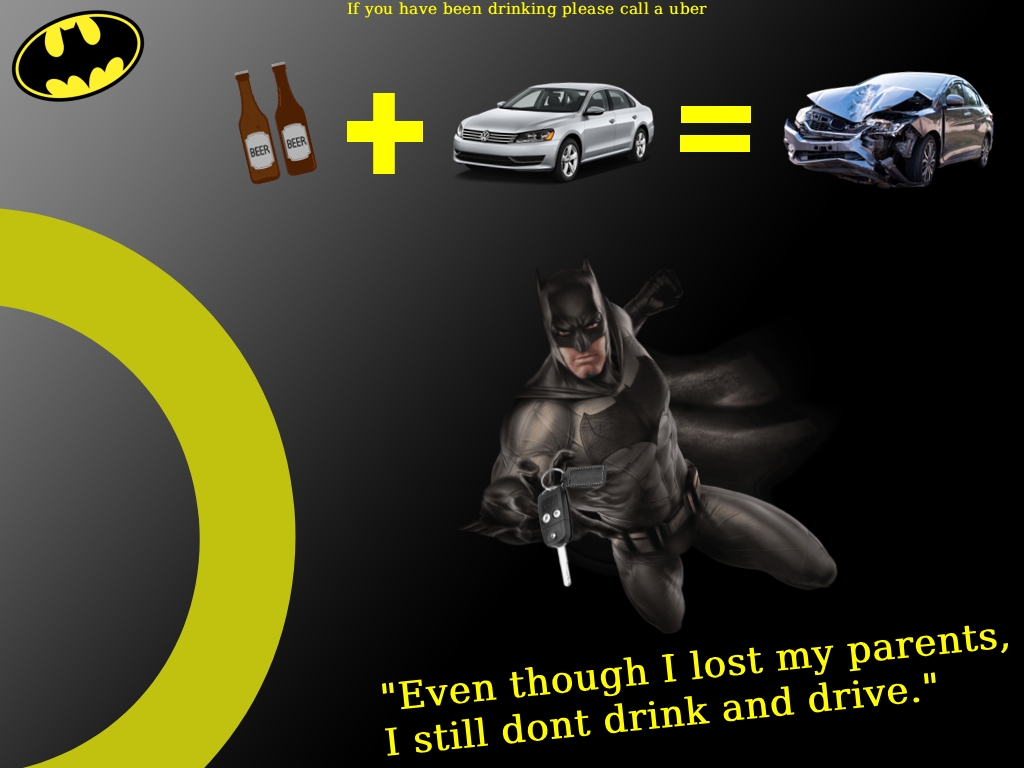
<style>
.page{position:relative;width:1024px;height:768px;background:#000000}
.page>*{position:absolute;margin:0}
.t1{font:15.4px "DejaVuSerif";color:#fffc00;font-weight:bold}
.t2{font:37.5px "DejaVuSerif";color:#fffc00;font-weight:bold}
</style>
<div class="page">
<p class="t1" style="left:347px;top:2px;width:360px;height:16px">If you have been drinking please call a uber</p>
<p class="t2" style="left:381px;top:625px;width:627px;height:131px;rotate:-6deg">"Even though I lost my parents,<br>I still dont drink and drive."</p>
</div>
